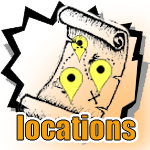
<style>
.page{position:relative;width:150px;height:150px}
.page>*{position:absolute;margin:0}
.t1{font:31px "Impact";color:#f49f0b}
</style>
<div class="page">
<p class="t1" style="left:17px;top:115px;width:119px;height:25px">locations</p>
<p class="t1" style="left:17px;top:115px;width:119px;height:25px">locations</p>
</div>
